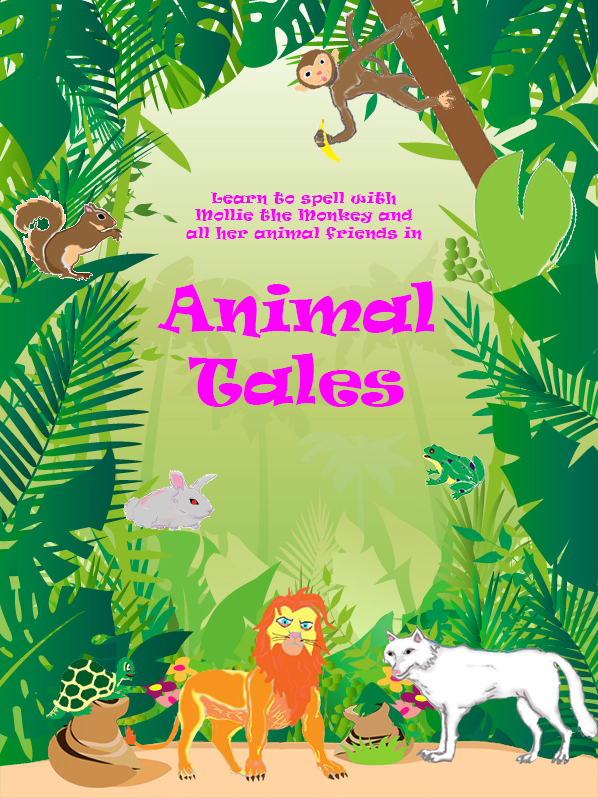
<style>
.page{position:relative;width:598px;height:798px}
.page>*{position:absolute;margin:0}
.t1{font:14.4px "Ravie";color:#ff00ff}
.t2{font:60px "Ravie";color:#ff00ff}
</style>
<div class="page">
<p class="t1" style="left:186px;top:192px;width:236px;height:48px;text-align:center">Learn to spell with<br>Mollie the Monkey and<br>all her animal friends in</p>
<p class="t2" style="left:157px;top:281px;width:278px;height:126px;text-align:center">Animal<br>Tales</p>
</div>
